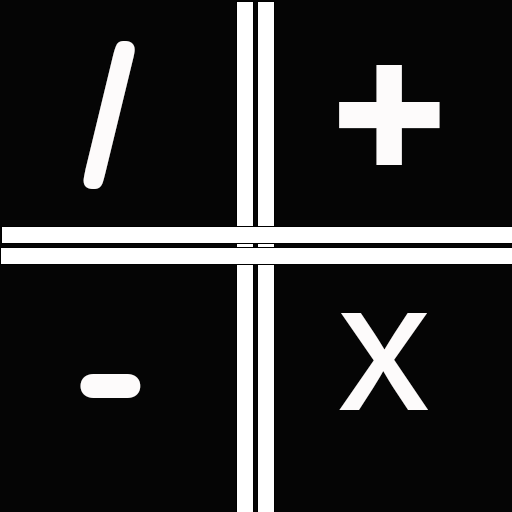
<style>
.page{position:relative;width:512px;height:512px;background:#050505}
.page>*{position:absolute;margin:0}
.t1{font:200px "ArialRoundedMTBold";color:#fdfbfb}
.t2{font:200px "MyriadHebrew-Regular";color:#fdfbfb}
</style>
<div class="page">
<p class="t1" style="left:83px;top:41px;width:52px;height:148px">/</p>
<p class="t1" style="left:339px;top:65px;width:101px;height:100px">+</p>
<p class="t2" style="left:339px;top:313px;width:89px;height:97px">x</p>
<p class="t1" style="left:80px;top:374px;width:61px;height:24px">-</p>
</div>
